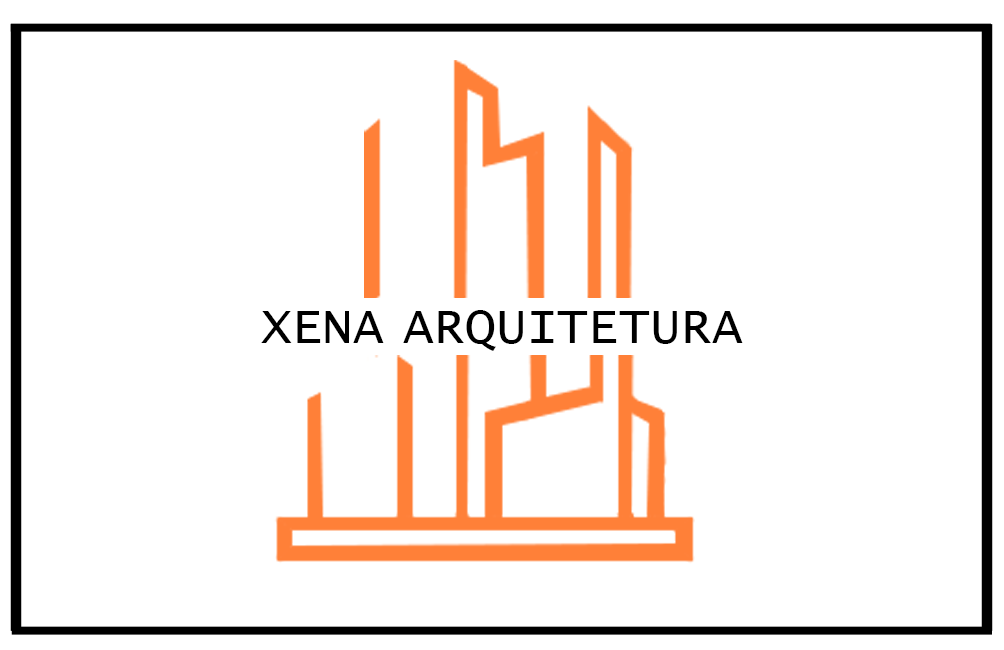
<style>
.page{position:relative;width:1004px;height:650px;background:#ffffff}
.page>*{position:absolute;margin:0}
.t1{font:51.2px "LucidaConsole";color:#000000}
</style>
<div class="page">
<p class="t1" style="left:261px;top:311px;width:123px;height:32px">XENA</p>
<p class="t1" style="left:403px;top:310px;width:340px;height:41px">ARQUITETURA</p>
</div>
